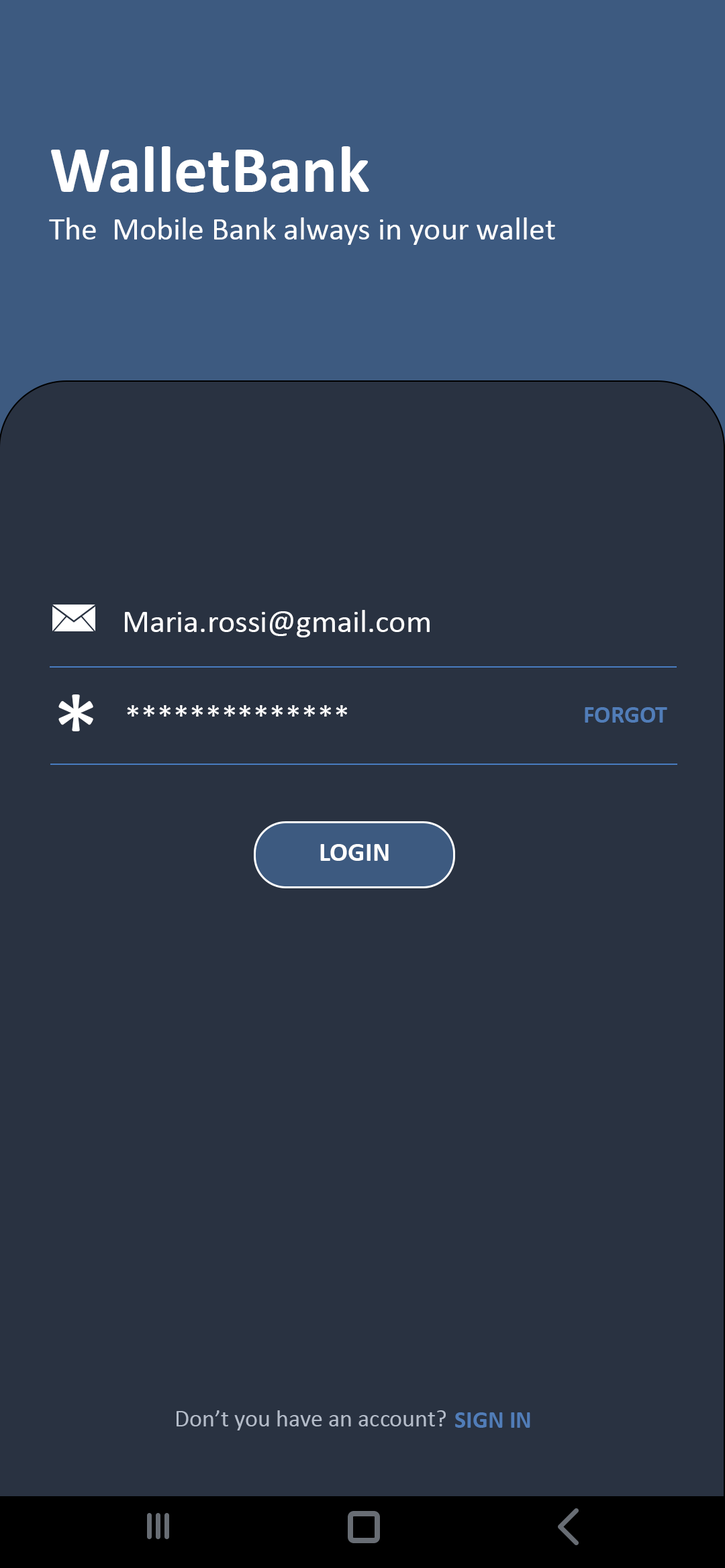
<style>
.page{position:relative;width:725px;height:1568px;background:#293241}
.page>*{position:absolute;margin:0}
.t1{font:67.1px "Calibri-Bold";color:#ffffff}
.t2{font:32.2px "Calibri";color:#ffffff}
.t3{font:100.6px "Calibri";color:#ffffff}
.t4{font:24.2px "Calibri-Bold";color:#517db8}
.t5{font:26.8px "Calibri-Bold";color:#ffffff}
.t6{font:24.2px "Calibri";color:#b4bcc9}
</style>
<div class="page">
<p class="t1" style="left:51px;top:146px;width:318px;height:47px">WalletBank</p>
<p class="t2" style="left:49px;top:217px;width:506px;height:28px">The  Mobile Bank always in your wallet</p>
<p class="t2" style="left:125px;top:610px;width:304px;height:27px">Maria.rossi@gmail.com</p>
<p class="t3" style="left:58px;top:694px;width:35px;height:37px">*</p>
<p class="t2" style="left:127px;top:705px;width:220px;height:12px">**************</p>
<p class="t4" style="left:584px;top:707px;width:83px;height:16px">FORGOT</p>
<p class="t5" style="left:320px;top:844px;width:68px;height:17px">LOGIN</p>
<p class="t6" style="left:176px;top:1410px;width:270px;height:20px">Don’t you have an account?</p>
<p class="t4" style="left:455px;top:1412px;width:75px;height:16px">SIGN IN</p>
</div>
